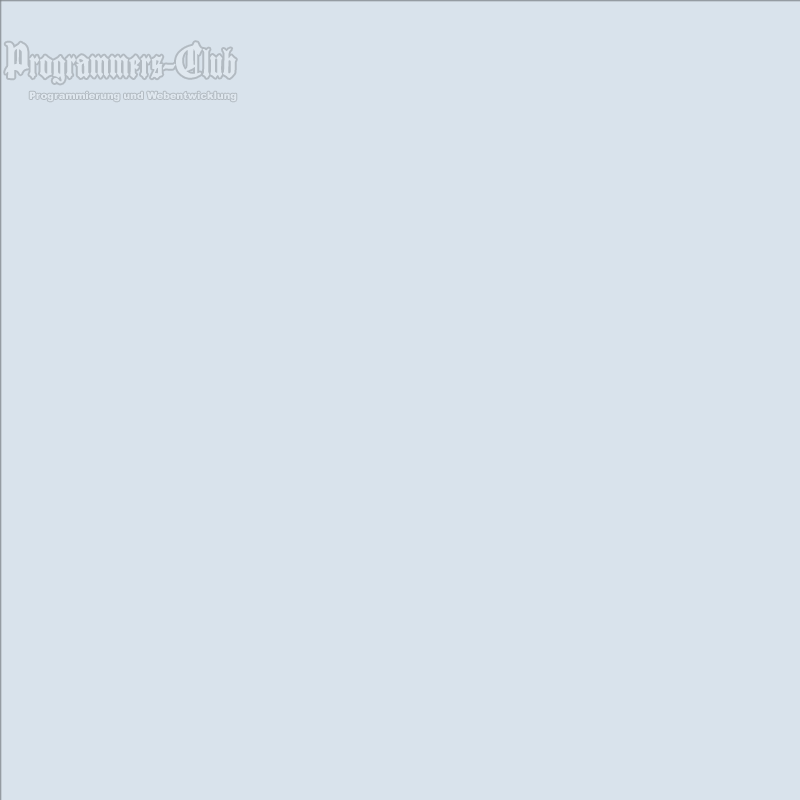
<style>
.page{position:relative;width:800px;height:800px;background:#d9e3ec}
.page>*{position:absolute;margin:0}
.t1{font:36px "Cantebriggia";color:#e0e8ef}
.t2{font:10px "Arial-Black";color:#e0e8ef}
</style>
<div class="page">
<p class="t1" style="left:5px;top:42px;width:231px;height:42px">Programmers-Club</p>
<p class="t2" style="left:29px;top:91px;width:208px;height:11px">Programmierung und Webentwicklung</p>
</div>
